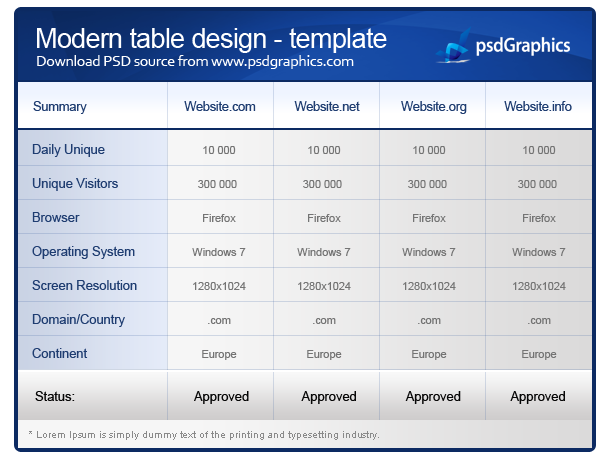
<style>
.page{position:relative;width:610px;height:458px}
.page>*{position:absolute;margin:0}
.t1{font:27px "ArialMT";letter-spacing:-0.025em;color:#ffffff}
.t2{font:16px "Corbel";letter-spacing:-0.025em;color:#ffffff}
.t3{font:13px "ArialMT";letter-spacing:-0.025em;color:#1f3d71}
.t4{font:13px/34px "ArialMT";letter-spacing:-0.005em;color:#1f3d71}
.t5{font:11px/34px "ArialMT";letter-spacing:-0.005em;color:#747474}
.t6{font:13px "ArialMT";letter-spacing:-0.005em;color:#070707}
.t7{font:10px "ArialMT";letter-spacing:-0.005em;color:#8a8a8a}
</style>
<div class="page">
<p class="t1" style="left:37px;top:28px;width:350px;height:25px">Modern table design - template</p>
<p class="t2" style="left:37px;top:55px;width:317px;height:14px">Download PSD source from www.psdgraphics.com</p>
<p class="t3" style="left:33px;top:101px;width:54px;height:13px">Summary</p>
<p class="t3" style="left:184px;top:101px;width:72px;height:10px">Website.com</p>
<p class="t3" style="left:294px;top:101px;width:66px;height:10px">Website.net</p>
<p class="t3" style="left:401px;top:101px;width:66px;height:13px">Website.org</p>
<p class="t3" style="left:504px;top:101px;width:68px;height:10px">Website.info</p>
<p class="t4" style="left:32px;top:144px;width:105px;height:214px">Daily Unique<br>Unique Visitors <br>Browser <br>Operating System<br>Screen Resolution<br>Domain/Country<br>Continent</p>
<p class="t5" style="left:192px;top:146px;width:54px;height:214px;text-align:center">10 000<br>300 000 <br>Firefox<br>Windows 7<br>1280x1024<br>.com<br>Europe</p>
<p class="t5" style="left:297px;top:146px;width:54px;height:214px;text-align:center">10 000<br>300 000 <br>Firefox<br>Windows 7<br>1280x1024<br>.com<br>Europe</p>
<p class="t5" style="left:402px;top:146px;width:54px;height:214px;text-align:center">10 000<br>300 000 <br>Firefox<br>Windows 7<br>1280x1024<br>.com<br>Europe</p>
<p class="t5" style="left:512px;top:146px;width:54px;height:214px;text-align:center">10 000<br>300 000 <br>Firefox<br>Windows 7<br>1280x1024<br>.com<br>Europe</p>
<p class="t6" style="left:35px;top:391px;width:40px;height:10px">Status:</p>
<p class="t6" style="left:194px;top:391px;width:371px;height:13px">Approved               Approved              Approved              Approved</p>
<p class="t7" style="left:29px;top:431px;width:350px;height:9px">* Lorem Ipsum is simply dummy text of the printing and typesetting industry.</p>
</div>
